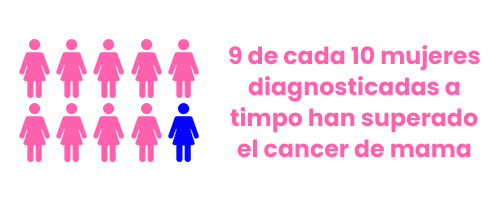
<style>
.page{position:relative;width:500px;height:200px;background:#ffffff}
.page>*{position:absolute;margin:0}
.t1{font:23.7px "Poppins-Bold";color:#ff61af}
</style>
<div class="page">
<p class="t1" style="left:229px;top:45px;width:251px;height:26px">9 de cada 10 mujeres</p>
<p class="t1" style="left:248px;top:76px;width:212px;height:26px">diagnosticadas a</p>
<p class="t1" style="left:230px;top:107px;width:248px;height:26px">timpo han superado</p>
<p class="t1" style="left:237px;top:139px;width:234px;height:19px">el cancer de mama</p>
</div>
